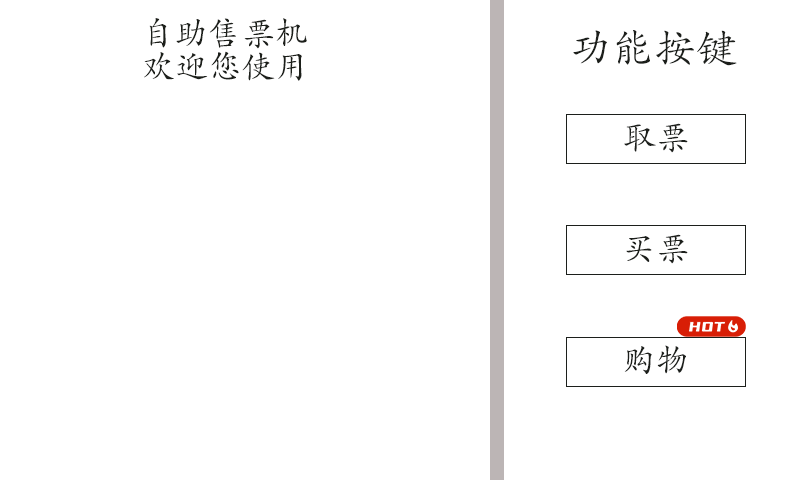
<style>
.page{position:relative;width:800px;height:480px;background:#ffffff}
.page>*{position:absolute;margin:0}
.t1{font:33.3px/33.3px "STKaiti";color:#1c1f1a}
.t2{font:41.7px "STKaiti";color:#1c1f1b}
.t3{font:33.3px "STKaiti";color:#1c1f1b}
</style>
<div class="page">
<p class="t1" style="left:144px;top:18px;width:163px;height:63px;text-align:center">自助售票机<br>欢迎您使用</p>
<p class="t2" style="left:573px;top:30px;width:164px;height:36px">功能按键</p>
<p class="t3" style="left:624px;top:123px;width:64px;height:30px">取票</p>
<p class="t3" style="left:626px;top:234px;width:62px;height:30px">买票</p>
<p class="t3" style="left:624px;top:345px;width:62px;height:29px">购物</p>
</div>
